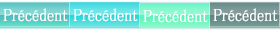
<style>
.page{position:relative;width:280px;height:31px}
.page>*{position:absolute;margin:0}
.t1{font:17.7px "MS-PMincho";color:#ffffff;font-weight:bold;scale:0.84 1}
</style>
<div class="page">
<p class="t1" style="left:3px;top:8px;width:65px;height:14px">Précédent</p>
<p class="t1" style="left:73px;top:8px;width:65px;height:14px">Précédent</p>
<p class="t1" style="left:143px;top:9px;width:65px;height:14px">Précédent</p>
<p class="t1" style="left:213px;top:8px;width:65px;height:14px">Précédent</p>
</div>
